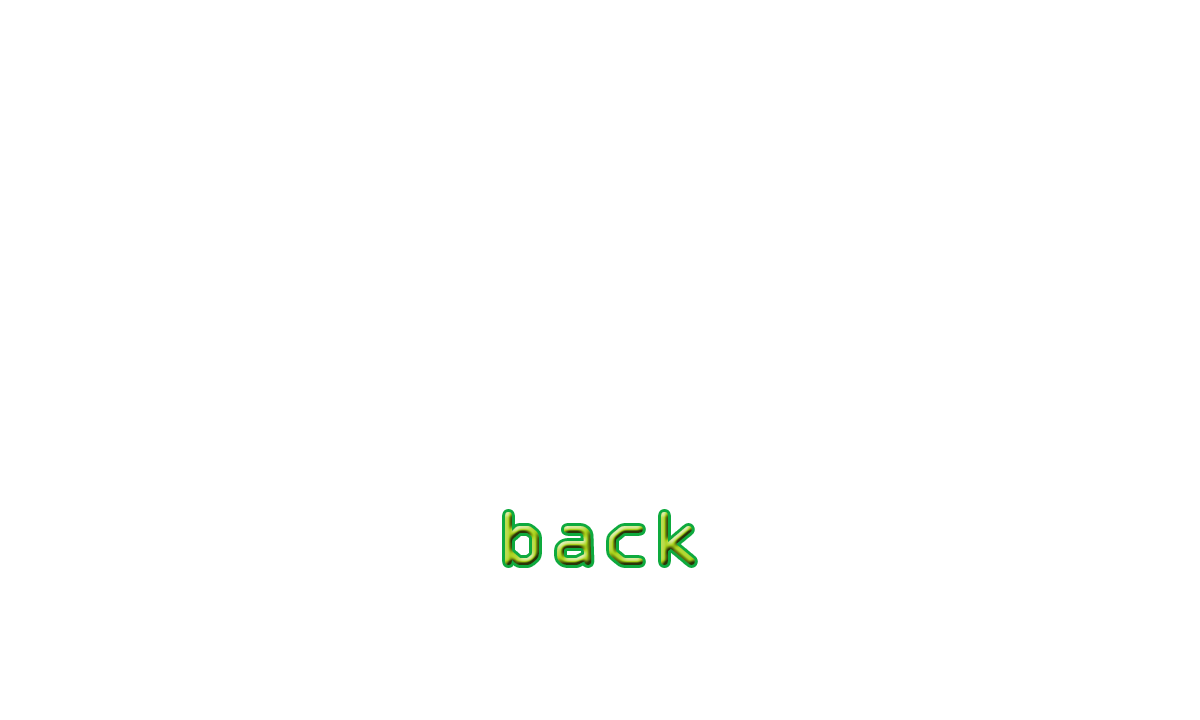
<style>
.page{position:relative;width:1200px;height:720px;background:#ffffff}
.page>*{position:absolute;margin:0}
.t1{font:72px "OCRAStd"}
</style>
<div class="page">
<p class="t1" style="left:505px;top:512px;width:190px;height:53px">back</p>
</div>
